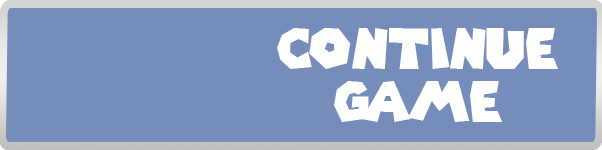
<style>
.page{position:relative;width:602px;height:150px;background:#768cbb}
.page>*{position:absolute;margin:0}
.t1{font:54.8px/53.1px "SuperMarioGalaxy";color:#ffffff}
</style>
<div class="page">
<p class="t1" style="left:277px;top:28px;width:282px;height:94px;text-align:center">Continue<br>game</p>
</div>
